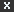
<style>
.page{position:relative;width:14px;height:12px;background:#333333}
.page>*{position:absolute;margin:0}
.t1{font:12px "Arial-BoldMT";color:#e9f1f3}
</style>
<div class="page">
<p class="t1" style="left:4px;top:2px;width:6px;height:7px">x</p>
</div>
